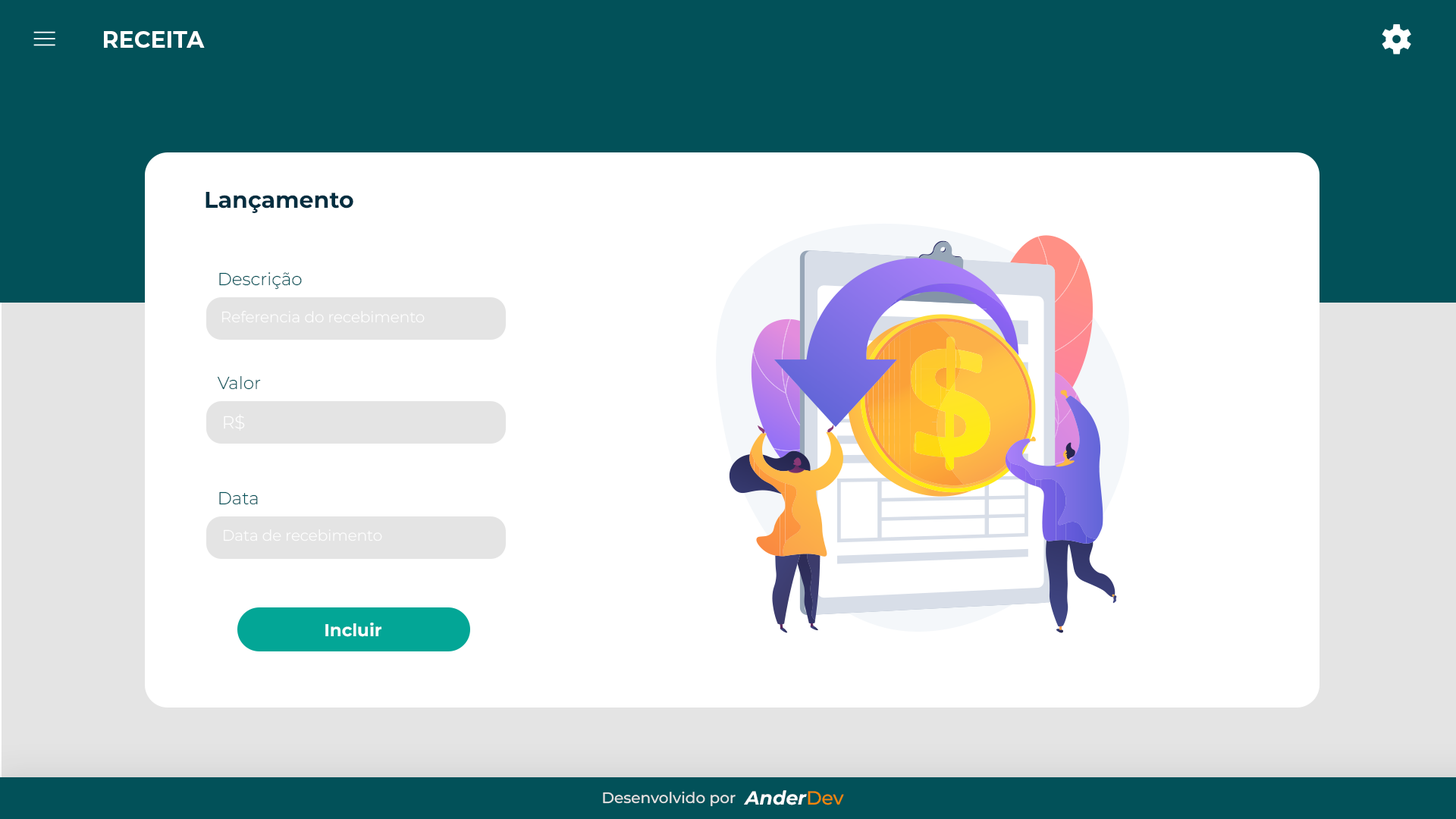
<style>
.page{position:relative;width:1456px;height:819px;background:#ffffff}
.page>*{position:absolute;margin:0}
.t1{font:22.7px "Montserrat-Bold";color:#ffffff}
.t2{font:22.7px "Montserrat-Bold";color:#012e40}
.t3{font:17.4px "Montserrat-Light";color:#025159}
.t4{font:15.2px "Montserrat-Light";color:#ffffff}
.t5{font:17.4px "Montserrat-Light";color:#ffffff}
.t6{font:17.4px "Montserrat-Bold";color:#ffffff}
.t7{font:15.2px "Montserrat-Medium";color:#e4e4e4}
.t8{font:19px "Montserrat-BoldItalic";color:#ffffff}
.t9{font:19px "Montserrat-Medium";color:#f28705}
</style>
<div class="page">
<p class="t1" style="left:104px;top:31px;width:101px;height:17px">RECEITA</p>
<p class="t2" style="left:206px;top:192px;width:147px;height:21px">Lançamento</p>
<p class="t3" style="left:219px;top:272px;width:83px;height:18px">Descrição</p>
<p class="t4" style="left:222px;top:310px;width:203px;height:13px">Referencia do recebimento</p>
<p class="t3" style="left:217px;top:375px;width:44px;height:15px">Valor</p>
<p class="t5" style="left:224px;top:414px;width:21px;height:17px">R$</p>
<p class="t3" style="left:219px;top:491px;width:39px;height:14px">Data</p>
<p class="t4" style="left:224px;top:529px;width:158px;height:12px">Data de recebimento</p>
<p class="t6" style="left:325px;top:623px;width:56px;height:14px">Incluir</p>
<p class="t7" style="left:603px;top:791px;width:133px;height:16px">Desenvolvido por</p>
<p class="t8" style="left:744px;top:790px;width:100px;height:15px">Ander<span class="t9">Dev</span></p>
</div>
